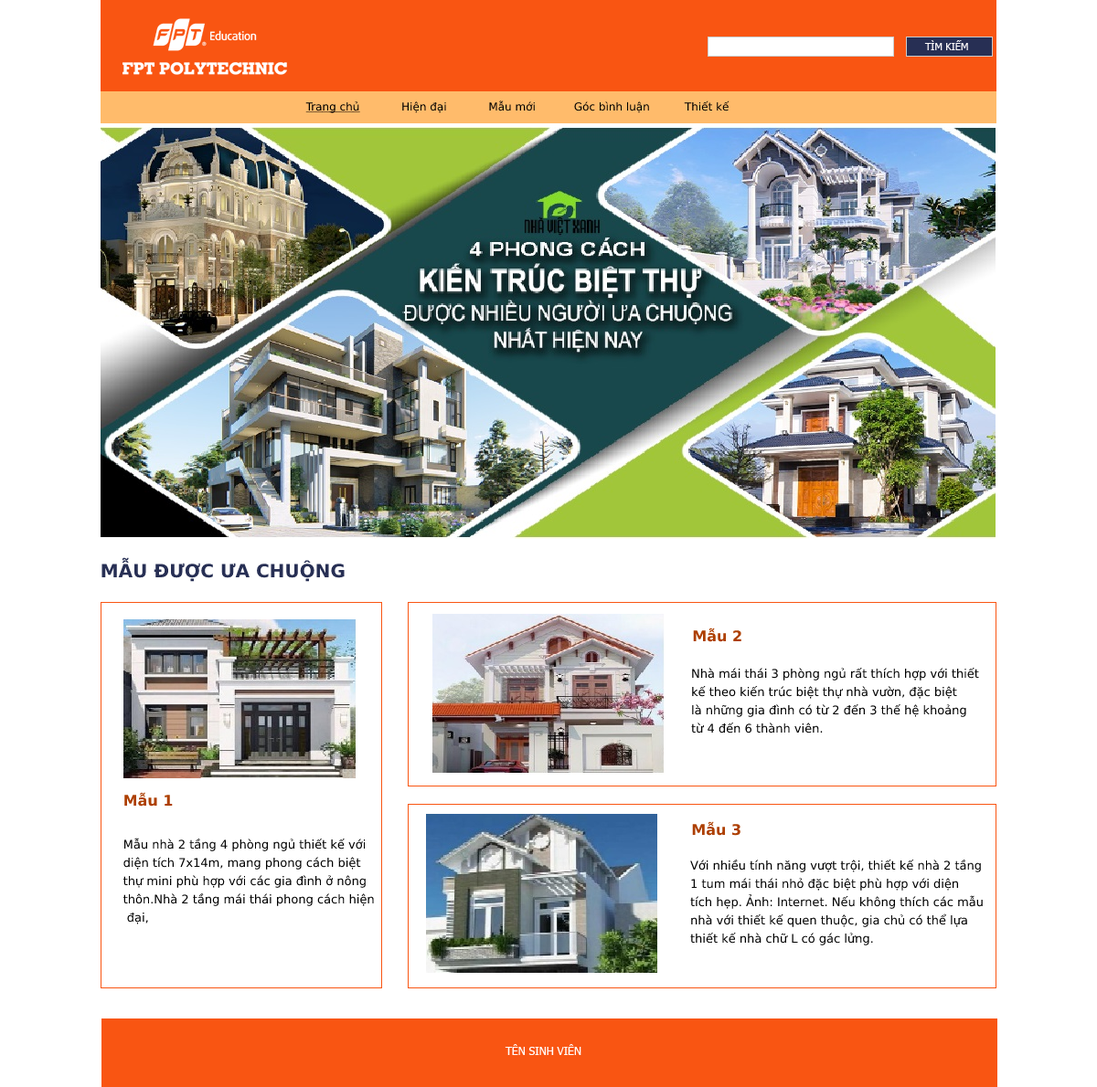
<style>
.page{position:relative;width:1097px;height:1087px;background:#ffffff}
.page>*{position:absolute;margin:0}
.t1{font:10.1px "Tahoma";color:#fefbfb}
.t2{font:11px "Tahoma";color:#000000}
.t3{font:11px "Tahoma";color:#000000;text-decoration:underline}
.t4{font:18.3px "Tahoma-Bold";color:#272f54}
.t5{font:14.6px "Tahoma-Bold";color:#ad3f00}
.t6{font:11.9px/18.3px "Tahoma";color:#000000}
.t7{font:11px "Tahoma";color:#ffffff}
</style>
<div class="page">
<p class="t1" style="left:924px;top:40px;width:44px;height:10px">TÌM KIẾM</p>
<p class="t2" style="left:305px;top:101px;width:424px;height:12px"><span class="t3">Trang chủ            </span>Hiện đại            Mẫu mới           Góc bình luận          Thiết kế</p>
<p class="t4" style="left:101px;top:557px;width:244px;height:25px">MẪU ĐƯỢC ƯA CHUỘNG</p>
<p class="t5" style="left:693px;top:628px;width:48px;height:14px">Mẫu 2</p>
<p class="t6" style="left:691px;top:667px;width:288px;height:67px">Nhà mái thái 3 phòng ngủ rất thích hợp với thiết <br>kế theo kiến trúc biệt thự nhà vườn, đặc biệt <br>là những gia đình có từ 2 đến 3 thế hệ khoảng <br>từ 4 đến 6 thành viên.</p>
<p class="t5" style="left:124px;top:792px;width:49px;height:15px">Mẫu 1</p>
<p class="t5" style="left:692px;top:822px;width:48px;height:14px">Mẫu 3</p>
<p class="t6" style="left:123px;top:838px;width:251px;height:87px">Mẫu nhà 2 tầng 4 phòng ngủ thiết kế với <br>diện tích 7x14m, mang phong cách biệt <br>thự mini phù hợp với các gia đình ở nông <br>thôn.Nhà 2 tầng mái thái phong cách hiện<br> đại,</p>
<p class="t6" style="left:690px;top:859px;width:292px;height:87px">Với nhiều tính năng vượt trội, thiết kế nhà 2 tầng <br>1 tum mái thái nhỏ đặc biệt phù hợp với diện <br>tích hẹp. Ảnh: Internet. Nếu không thích các mẫu <br>nhà với thiết kế quen thuộc, gia chủ có thể lựa <br>thiết kế nhà chữ L có gác lửng.</p>
<p class="t7" style="left:504px;top:1044px;width:77px;height:11px">TÊN SINH VIÊN</p>
</div>
